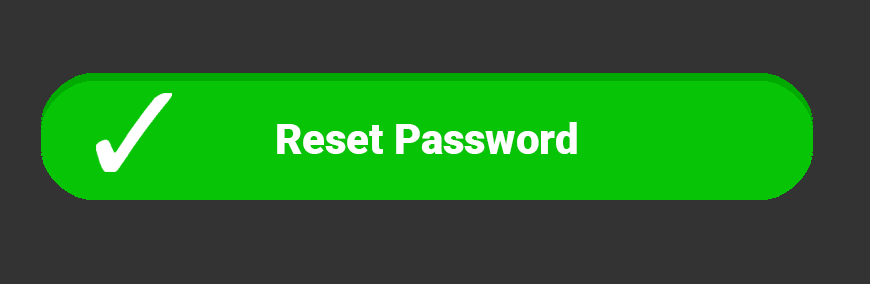
<style>
.page{position:relative;width:870px;height:284px;background:#333333}
.page>*{position:absolute;margin:0}
.t1{font:41.7px "Roboto-Black";color:#ffffff}
</style>
<div class="page">
<p class="t1" style="left:277px;top:122px;width:300px;height:32px">Reset Password</p>
</div>
